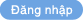
<style>
.page{position:relative;width:83px;height:20px;background:#6da4e2}
.page>*{position:absolute;margin:0}
.t1{font:12px "VNI-Helve";color:#fefefe}
</style>
<div class="page">
<p class="t1" style="left:11px;top:5px;width:62px;height:12px">Ñaêng nhaäp</p>
</div>
